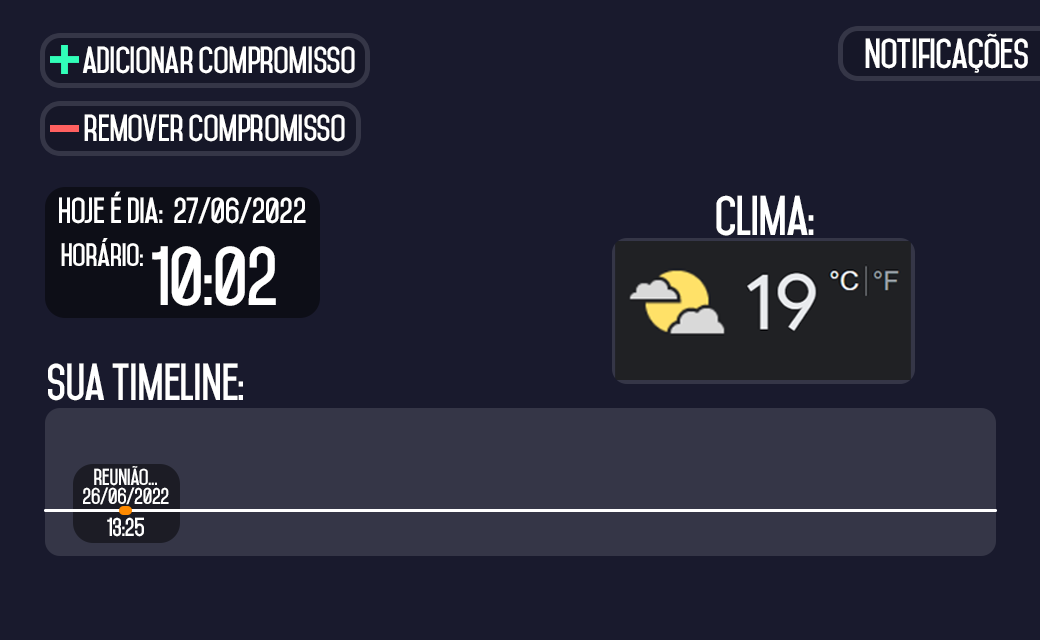
<style>
.page{position:relative;width:1040px;height:640px;background:#191a2d}
.page>*{position:absolute;margin:0}
.t1{font:36px "Mohave-Bold";letter-spacing:-0.03em;color:#ffffff}
.t2{font:32.4px "Mohave-Bold";letter-spacing:-0.03em;color:#ffffff}
.t3{font:31.1px "Mohave-Bold";letter-spacing:-0.03em;color:#ffffff}
.t4{font:48px "Mohave-Bold";letter-spacing:-0.03em;color:#ffffff}
.t5{font:27.8px "Mohave-Bold";letter-spacing:-0.03em;color:#ffffff}
.t6{font:72px "Mohave-Bold";letter-spacing:-0.03em;color:#ffffff}
.t7{font:44.7px "Mohave-Bold";letter-spacing:-0.03em;color:#ffffff}
.t8{font:19.8px "Mohave-Bold";letter-spacing:-0.03em;color:#ffffff}
.t9{font:22.4px "Mohave-Bold";letter-spacing:-0.03em;color:#ffffff}
</style>
<div class="page">
<p class="t1" style="left:865px;top:33px;width:163px;height:40px">notificações</p>
<p class="t2" style="left:82px;top:46px;width:273px;height:28px">adicionar compromisso</p>
<p class="t2" style="left:84px;top:114px;width:261px;height:28px">remover compromisso</p>
<p class="t3" style="left:59px;top:191px;width:247px;height:33px">hoje é dia:  27/06/2022</p>
<p class="t4" style="left:716px;top:195px;width:98px;height:41px">clima:</p>
<p class="t5" style="left:61px;top:238px;width:82px;height:28px">horário:</p>
<p class="t6" style="left:152px;top:246px;width:124px;height:60px">10:02</p>
<p class="t7" style="left:48px;top:363px;width:195px;height:38px">sua timeline:</p>
<p class="t8" style="left:94px;top:466px;width:63px;height:20px">reunião...</p>
<p class="t8" style="left:83px;top:487px;width:86px;height:18px">26/06/2022</p>
<p class="t9" style="left:107px;top:517px;width:37px;height:20px">13:25</p>
</div>
